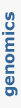
<style>
.page{position:relative;width:21px;height:108px;background:#f7f7f7}
.page>*{position:absolute;margin:0}
.t1{font:16px "Verdana-Bold";color:#336699}
</style>
<div class="page">
<p class="t1" style="left:2px;top:12px;width:16px;height:85px;rotate:-90deg">genomics</p>
</div>
